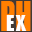
<style>
.page{position:relative;width:32px;height:32px;background:#ff7f00}
.page>*{position:absolute;margin:0}
.t1{font:38px "Impact";color:#ff7f00;scale:0.8 1}
.t2{font:20px "Impact";letter-spacing:0.1em;color:#ffffff}
</style>
<div class="page">
<p class="t1" style="left:1px;top:1px;width:30px;height:30px">PH</p>
<p class="t2" style="left:6px;top:15px;width:21px;height:16px">EX</p>
</div>
